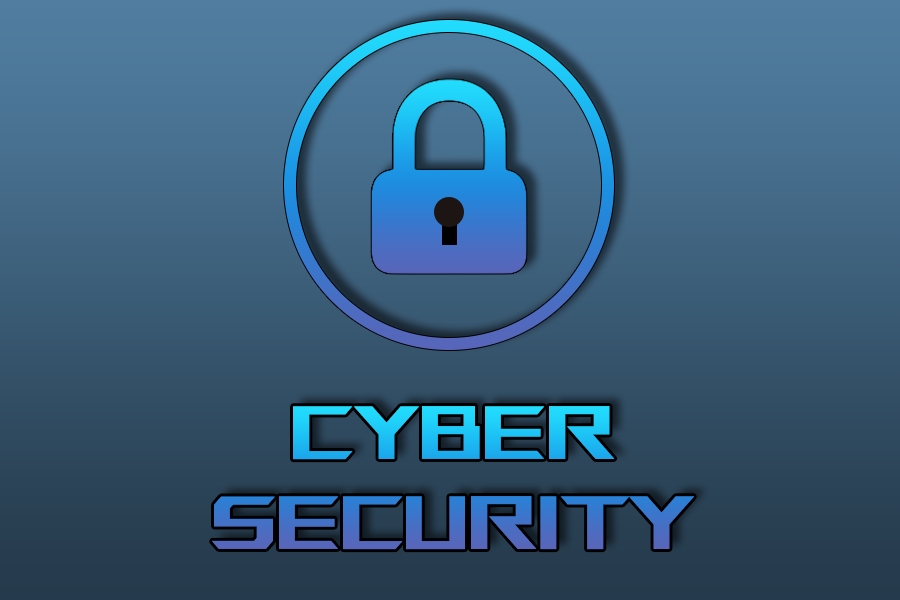
<style>
.page{position:relative;width:900px;height:600px}
.page>*{position:absolute;margin:0}
.t1{font:75px "ROGFonts-Regular"}
</style>
<div class="page">
<p class="t1" style="left:212px;top:406px;width:482px;height:144px;text-align:center">CYBER<br>SECURITY</p>
</div>
